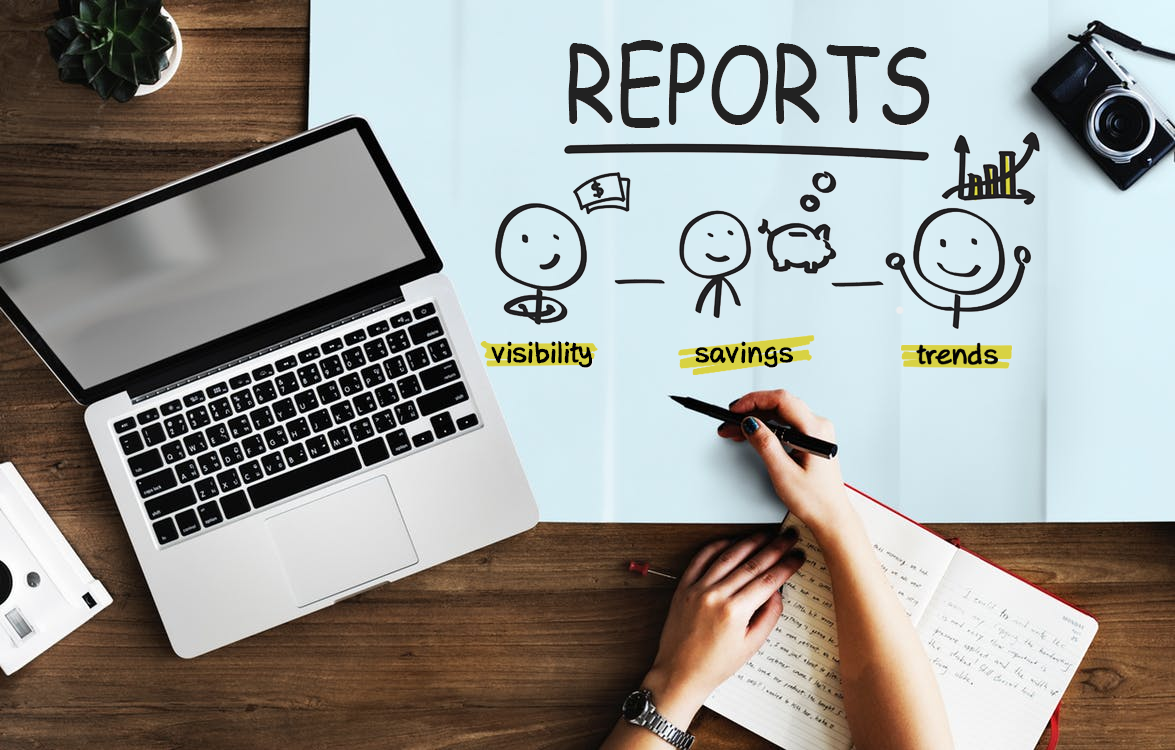
<style>
.page{position:relative;width:1175px;height:750px}
.page>*{position:absolute;margin:0}
.t1{font:105.6px "ComicSansMS";color:#222222;scale:0.76 1}
.t2{font:27.4px "AxureHandwriting";color:#020202;font-weight:bold}
</style>
<div class="page">
<p class="t1" style="left:568px;top:40px;width:362px;height:88px">REPORTS</p>
<p class="t2" style="left:491px;top:341px;width:101px;height:27px">visibility</p>
<p class="t2" style="left:695px;top:341px;width:98px;height:27px">savings</p>
</div>
